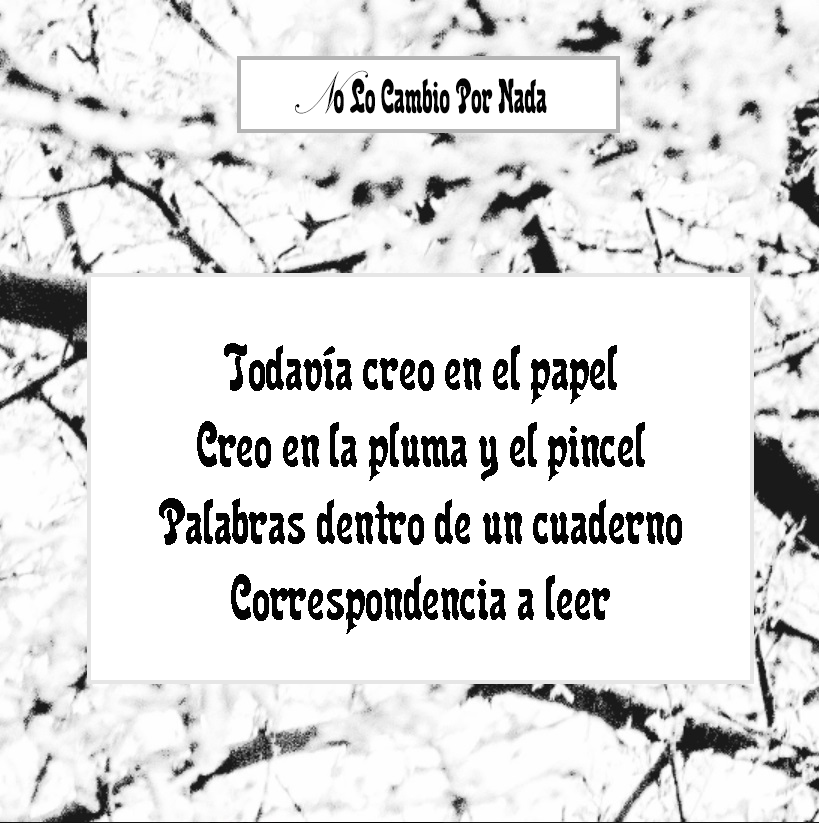
<style>
.page{position:relative;width:819px;height:823px;background:#ffffff}
.page>*{position:absolute;margin:0}
.t1{font:48px "Reclame";color:#030303;scale:0.79 1}
.t2{font:64px "KunstlerScript";color:#030303;scale:0.79 1}
.t3{font:64px "Reclame";color:#030303}
.t4{font:64px "Sweetgentle";color:#030303}
</style>
<div class="page">
<p class="t1" style="left:295px;top:70px;width:252px;height:44px"><span class="t2">N</span>o Lo Cambio Por Nada</p>
<p class="t3" style="left:159px;top:343px;width:523px;height:291px;text-align:center"><span class="t4"><br></span>Todavía creo en el papel<br>Creo en la pluma y el pincel<br>Palabras dentro de un cuaderno<br>Correspondencia a leer</p>
</div>
